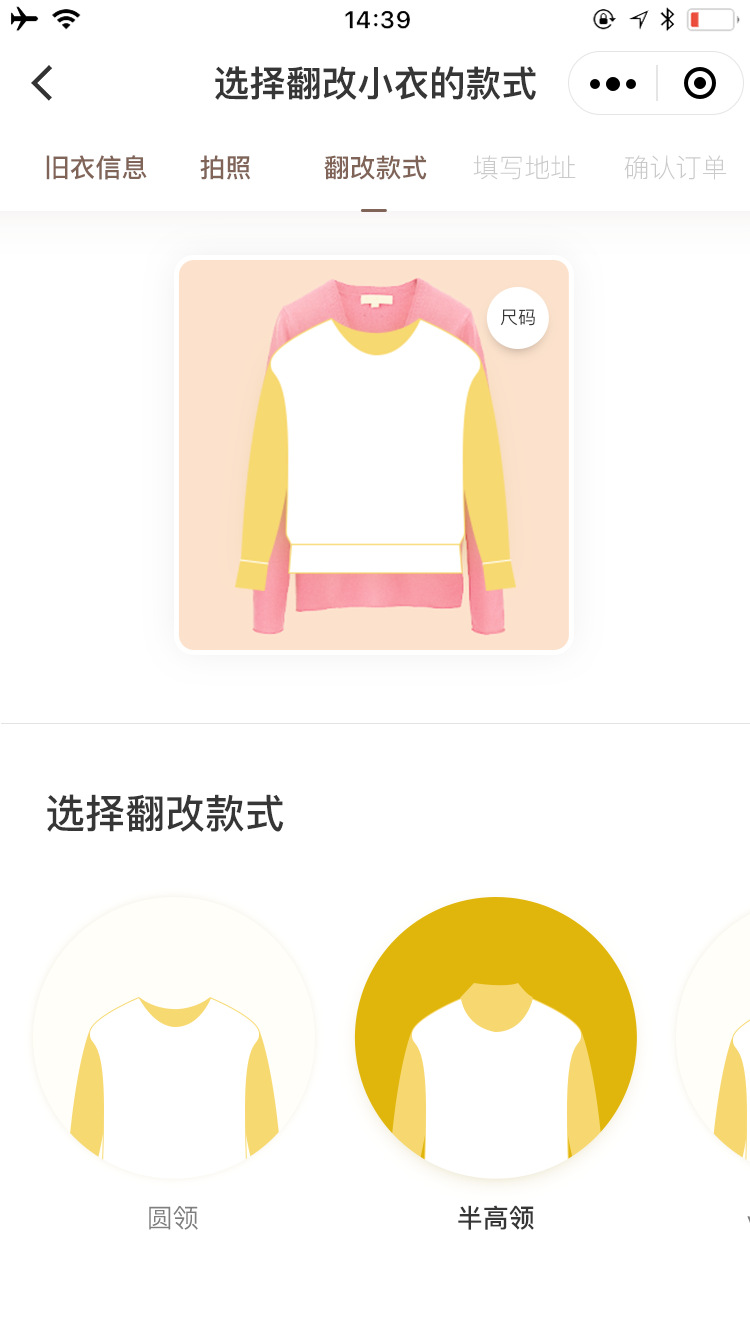
<style>
.page{position:relative;width:750px;height:1334px;background:#ffffff}
.page>*{position:absolute;margin:0}
.t1{font:36px "PingFang-SC-Heavy";color:#363636}
.t2{font:26px "PingFang-SC-Bold";color:#806458}
.t3{font:26px "PingFang-SC-Light";color:#cacaca}
.t4{font:18px "PingFang-SC-Medium";color:#363636}
.t5{font:40px "PingFang-SC-Bold";color:#363636}
.t6{font:26px "PingFang-SC-Regular";color:#7e7e7e}
.t7{font:26px "PingFang-SC-Bold";color:#363636}
</style>
<div class="page">
<p class="t1" style="left:215px;top:66px;width:321px;height:34px">选择翻改小衣的款式</p>
<p class="t2" style="left:46px;top:155px;width:101px;height:25px">旧衣信息</p>
<p class="t2" style="left:200px;top:155px;width:51px;height:25px">拍照</p>
<p class="t2" style="left:324px;top:155px;width:103px;height:25px">翻改款式</p>
<p class="t3" style="left:473px;top:155px;width:103px;height:25px">填写地址</p>
<p class="t3" style="left:624px;top:155px;width:102px;height:25px">确认订单</p>
<p class="t4" style="left:500px;top:309px;width:35px;height:17px">尺码</p>
<p class="t5" style="left:47px;top:794px;width:237px;height:38px">选择翻改款式</p>
<p class="t6" style="left:149px;top:1206px;width:49px;height:24px">圆领</p>
<p class="t7" style="left:458px;top:1205px;width:76px;height:25px">半高领</p>
</div>
